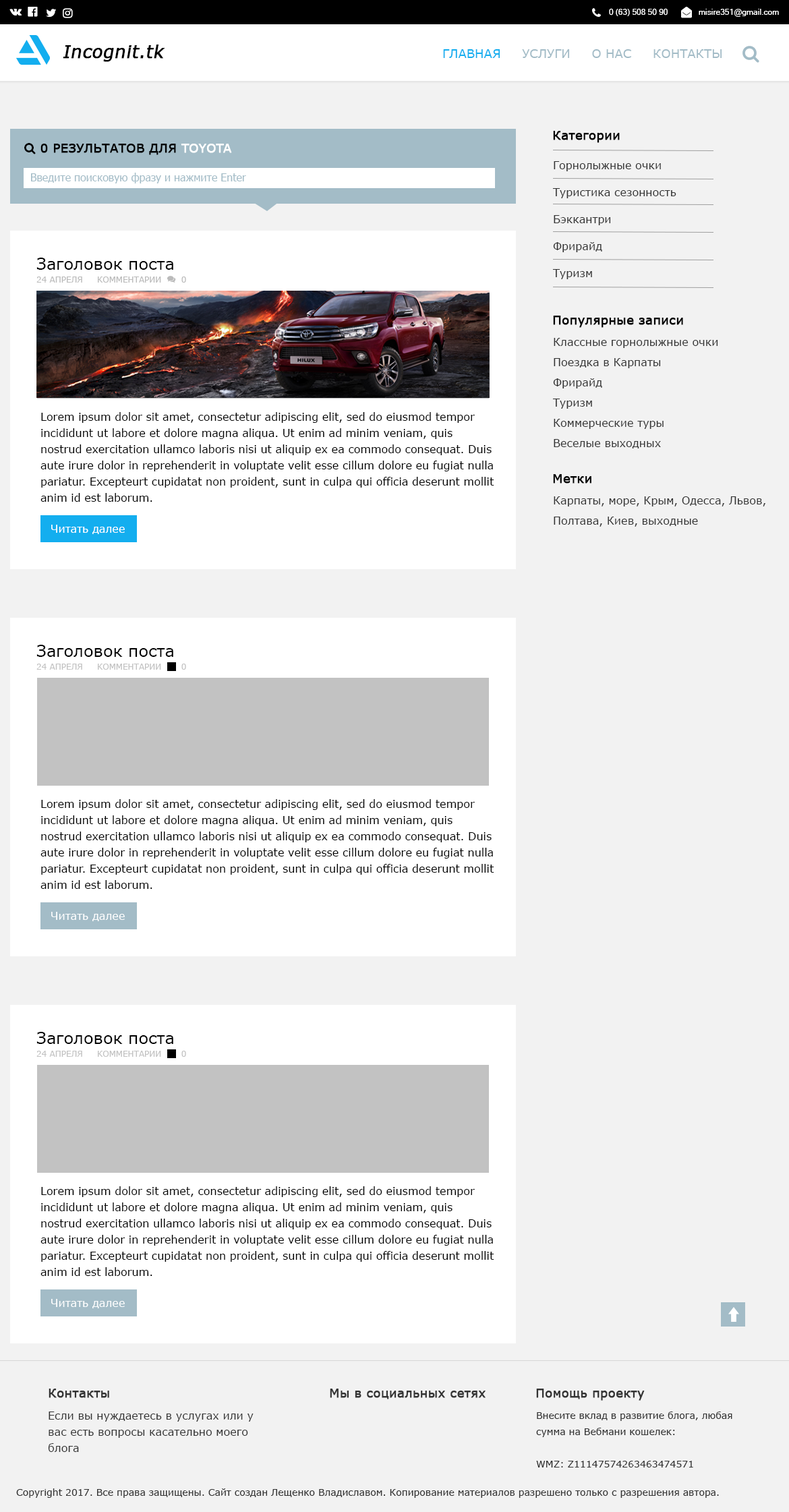
<style>
.page{position:relative;width:789px;height:1512px;background:#f2f2f2}
.page>*{position:absolute;margin:0}
.t1{font:8.1px "MicrosoftSansSerif";color:#ffffff}
.t2{font:17.5px "MSReferenceSansSerif";color:#000000;font-weight:bold;font-style:italic}
.t3{font:12.1px "MSReferenceSansSerif";color:#a3bcc7;text-transform:uppercase}
.t4{font:12.1px "MSReferenceSansSerif";color:#13aeef;text-transform:uppercase}
.t5{font:12.1px "MSReferenceSansSerif";color:#000000;font-weight:bold}
.t6{font:10.8px/27px "MSReferenceSansSerif";color:#333333}
.t7{font:10.8px "Tahoma";color:#a3bcc7}
.t8{font:16.2px "MSReferenceSansSerif";color:#000000}
.t9{font:16.2px "MSReferenceSansSerif";color:#000000;text-transform:uppercase}
.t10{font:8.1px "MSReferenceSansSerif";color:#bbbbbb;text-transform:uppercase}
.t11{font:10.8px/20.2px "MSReferenceSansSerif";color:#333333}
.t12{font:10.8px/16.2px "MSReferenceSansSerif";color:#000000}
.t13{font:10.8px "MSReferenceSansSerif";color:#ffffff}
.t14{font:12.1px "MSReferenceSansSerif";color:#333333;font-weight:bold}
.t15{font:10.8px/16.2px "MSReferenceSansSerif";color:#333333}
.t16{font:9.4px/16.2px "MSReferenceSansSerif";color:#333333}
.t17{font:9.4px "MSReferenceSansSerif";color:#333333}
</style>
<div class="page">
<p class="t1" style="left:609px;top:8px;width:58px;height:8px">0 (63) 508 50 90</p>
<p class="t1" style="left:698px;top:9px;width:81px;height:8px">misire351@gmail.com</p>
<p class="t2" style="left:63px;top:44px;width:102px;height:18px">Incognit.tk</p>
<p class="t3" style="left:443px;top:49px;width:279px;height:9px"><span class="t4">Главная     </span>Услуги     О нас     Контакты</p>
<p class="t5" style="left:553px;top:131px;width:67px;height:12px">Категории</p>
<p class="t6" style="left:552px;top:161px;width:124px;height:118px">Горнолыжные очки<br>Туристика сезонность<br>Бэккантри<br>Фрирайд<br>Туризм</p>
<p class="t7" style="left:31px;top:173px;width:215px;height:10px">Введите поисковую фразу и нажмите Enter</p>
<p class="t8" style="left:36px;top:258px;width:137px;height:12px"><span class="t9">З</span>аголовок поста</p>
<p class="t10" style="left:36px;top:276px;width:150px;height:7px">24 апреля     Комментарии       0</p>
<p class="t5" style="left:553px;top:316px;width:130px;height:12px">Популярные записи</p>
<p class="t11" style="left:552px;top:338px;width:166px;height:110px">Классные горнолыжные очки<br>Поездка в Карпаты<br>Фрирайд<br>Туризм<br>Коммерческие туры<br>Веселые выходных</p>
<p class="t12" style="left:40px;top:412px;width:454px;height:90px">Lorem ipsum dolor sit amet, consectetur adipiscing elit, sed do eiusmod tempor incididunt ut labore et dolore magna aliqua. Ut enim ad minim veniam, quis nostrud exercitation ullamco laboris nisi ut aliquip ex ea commodo consequat. Duis aute irure dolor in reprehenderit in voluptate velit esse cillum dolore eu fugiat nulla pariatur. Excepteurt cupidatat non proident, sunt in culpa qui officia deserunt mollit anim id est laborum.</p>
<p class="t5" style="left:553px;top:474px;width:38px;height:9px">Метки</p>
<p class="t11" style="left:554px;top:496px;width:211px;height:31px">Карпаты, море, Крым, Одесса, Львов, Полтава, Киев, выходные</p>
<p class="t13" style="left:51px;top:525px;width:74px;height:9px">Читать далее</p>
<p class="t8" style="left:36px;top:645px;width:137px;height:12px"><span class="t9">З</span>аголовок поста</p>
<p class="t12" style="left:40px;top:799px;width:454px;height:90px">Lorem ipsum dolor sit amet, consectetur adipiscing elit, sed do eiusmod tempor incididunt ut labore et dolore magna aliqua. Ut enim ad minim veniam, quis nostrud exercitation ullamco laboris nisi ut aliquip ex ea commodo consequat. Duis aute irure dolor in reprehenderit in voluptate velit esse cillum dolore eu fugiat nulla pariatur. Excepteurt cupidatat non proident, sunt in culpa qui officia deserunt mollit anim id est laborum.</p>
<p class="t13" style="left:51px;top:912px;width:74px;height:9px">Читать далее</p>
<p class="t8" style="left:36px;top:1032px;width:137px;height:12px"><span class="t9">З</span>аголовок поста</p>
<p class="t12" style="left:40px;top:1186px;width:454px;height:90px">Lorem ipsum dolor sit amet, consectetur adipiscing elit, sed do eiusmod tempor incididunt ut labore et dolore magna aliqua. Ut enim ad minim veniam, quis nostrud exercitation ullamco laboris nisi ut aliquip ex ea commodo consequat. Duis aute irure dolor in reprehenderit in voluptate velit esse cillum dolore eu fugiat nulla pariatur. Excepteurt cupidatat non proident, sunt in culpa qui officia deserunt mollit anim id est laborum.</p>
<p class="t13" style="left:51px;top:1299px;width:74px;height:9px">Читать далее</p>
<p class="t14" style="left:49px;top:1388px;width:60px;height:10px">Контакты</p>
<p class="t14" style="left:330px;top:1388px;width:155px;height:11px">Мы в социальных сетях</p>
<p class="t14" style="left:536px;top:1388px;width:109px;height:12px">Помощь проекту</p>
<p class="t15" style="left:48px;top:1411px;width:206px;height:41px">Если вы нуждаетесь в услугах или у вас есть вопросы касательно моего блога</p>
<p class="t16" style="left:536px;top:1411px;width:196px;height:56px">Внесите вклад в развитие блога, любая сумма на Вебмани кошелек:<br><br>WMZ: Z11147574263463474571</p>
<p class="t17" style="left:16px;top:1488px;width:703px;height:9px">Copyright 2017. Все права защищены. Сайт создан Лещенко Владиславом. Копирование материалов разрешено только с разрешения автора.</p>
</div>
